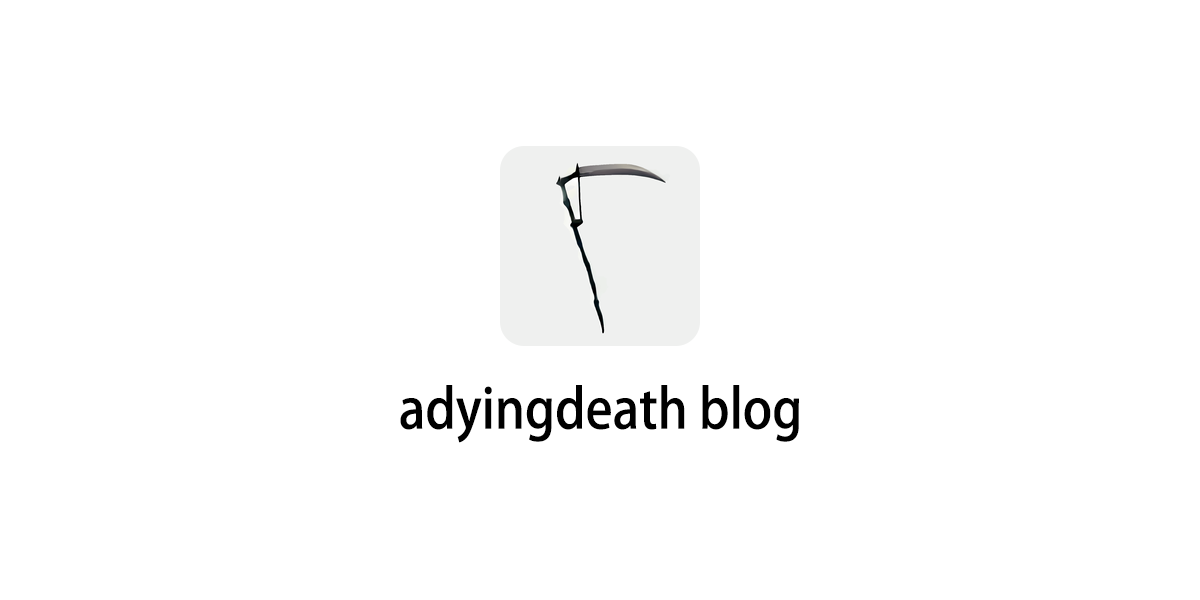
<style>
.page{position:relative;width:1200px;height:600px;background:#ffffff}
.page>*{position:absolute;margin:0}
.t1{font:54.5px "AdobeHeitiStd-Regular";color:#000000;scale:0.92 1}
</style>
<div class="page">
<p class="t1" style="left:400px;top:385px;width:399px;height:58px">adyingdeath blog</p>
</div>
